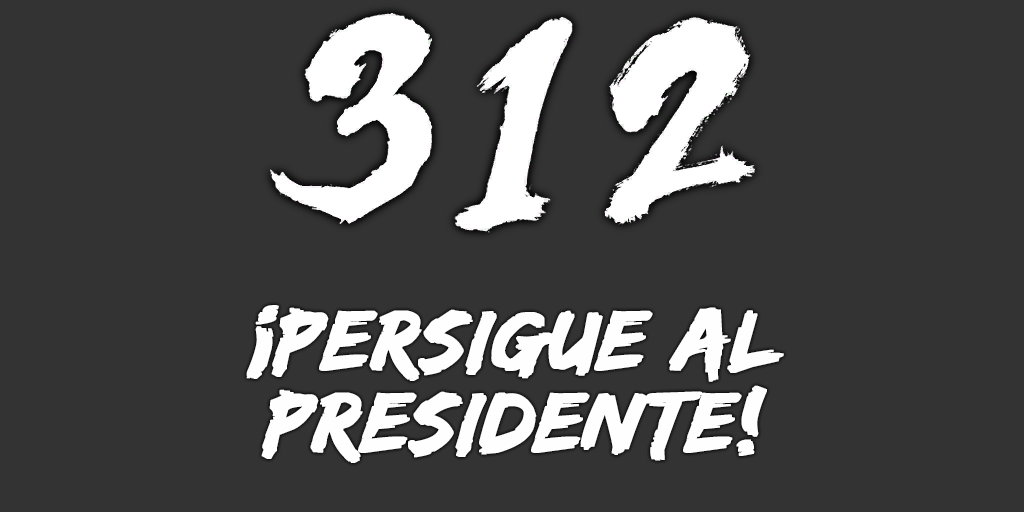
<style>
.page{position:relative;width:1024px;height:512px;background:#333333}
.page>*{position:absolute;margin:0}
.t1{font:88px/82px "EdoSZ";color:#fefefe;font-weight:bold;font-style:italic;scale:1.04 1}
</style>
<div class="page">
<p class="t1" style="left:246px;top:305px;width:538px;height:158px;text-align:center">¡persigue al<br>presidente!</p>
</div>
